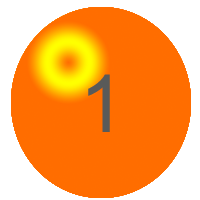
<style>
.page{position:relative;width:200px;height:200px;background:#ff6d00}
.page>*{position:absolute;margin:0}
.t1{font:80px "ArialMT";color:#595a59}
</style>
<div class="page">
<p class="t1" style="left:88px;top:74px;width:22px;height:58px">1</p>
</div>
